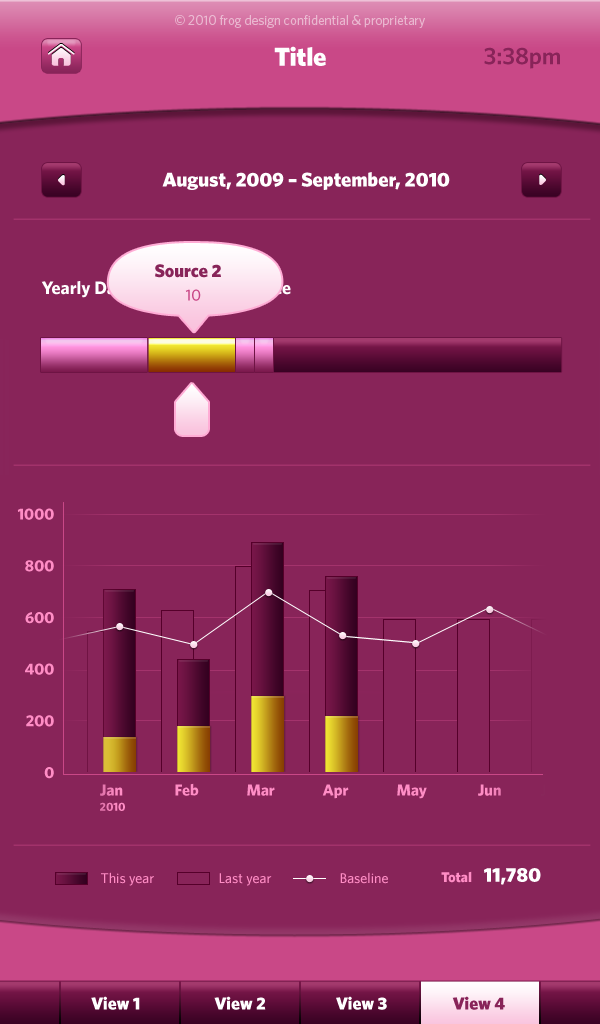
<style>
.page{position:relative;width:600px;height:1024px;background:#882459}
.page>*{position:absolute;margin:0}
.t1{font:13.3px "Whitney-Book";color:#eab7d0}
.t2{font:26px "Whitney-Black";color:#f0f0f0}
.t3{font:24px "Whitney-Semibold";color:#882459}
.t4{font:20px "Whitney-Black";color:#f0f0f0}
.t5{font:18px "Whitney-Black";color:#882459}
.t6{font:18px "Whitney-Bold";color:#f0f0f0}
.t7{font:16px "Whitney-Medium";color:#c94887}
.t8{font:16px/51.7px "Whitney-Bold";color:#ff8dc5}
.t9{font:11.7px/15.2px "Whitney-Bold";color:#f685bd}
.t10{font:16px/15.2px "Whitney-Bold";color:#f685bd}
.t11{font:16px "Whitney-Bold";color:#ff8dc5}
.t12{font:16px "Whitney-Bold";color:#fa89c1}
.t13{font:14px "Whitney-Medium";color:#ff8dc5}
.t14{font:14px "Whitney-Black";color:#ff8dc5}
.t15{font:17.5px "Whitney-Black";color:#ffffff}
.t16{font:17.5px "Whitney-Black";color:#882459}
</style>
<div class="page">
<p class="t1" style="left:175px;top:15px;width:250px;height:13px">© 2010 frog design confidential &amp; proprietary</p>
<p class="t2" style="left:274px;top:46px;width:52px;height:20px">Title</p>
<p class="t3" style="left:484px;top:47px;width:76px;height:22px">3:38pm</p>
<p class="t4" style="left:162px;top:172px;width:288px;height:18px">August, 2009 – September, 2010</p>
<p class="t5" style="left:155px;top:264px;width:66px;height:14px">Source 2</p>
<p class="t6" style="left:41px;top:281px;width:250px;height:17px">Yearly Data by Individual Source</p>
<p class="t7" style="left:185px;top:289px;width:16px;height:12px">10</p>
<p class="t8" style="left:17px;top:508px;width:37px;height:271px;text-align:right">1000<br>800<br>600<br>400<br>200<br>0</p>
<p class="t9" style="left:100px;top:784px;width:25px;height:27px"><span class="t10">Jan<br></span>2010</p>
<p class="t11" style="left:175px;top:783px;width:24px;height:13px">Feb</p>
<p class="t11" style="left:247px;top:784px;width:28px;height:12px">Mar</p>
<p class="t11" style="left:322px;top:784px;width:27px;height:15px">Apr</p>
<p class="t11" style="left:397px;top:784px;width:30px;height:15px">May</p>
<p class="t12" style="left:478px;top:784px;width:23px;height:12px">Jun</p>
<p class="t4" style="left:484px;top:868px;width:57px;height:17px">11,780</p>
<p class="t13" style="left:101px;top:872px;width:53px;height:14px">This year</p>
<p class="t13" style="left:219px;top:873px;width:53px;height:13px">Last year</p>
<p class="t13" style="left:340px;top:872px;width:48px;height:12px">Baseline</p>
<p class="t14" style="left:441px;top:871px;width:31px;height:12px">Total</p>
<p class="t15" style="left:91px;top:996px;width:49px;height:14px">View 1</p>
<p class="t15" style="left:214px;top:996px;width:52px;height:14px">View 2</p>
<p class="t15" style="left:336px;top:996px;width:51px;height:14px">View 3</p>
<p class="t16" style="left:452px;top:996px;width:53px;height:14px">View 4</p>
</div>
